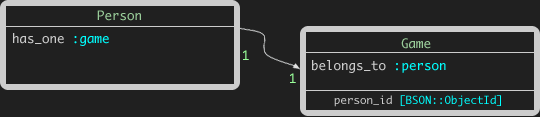
<style>
.page{position:relative;width:540px;height:117px;background:#202020}
.page>*{position:absolute;margin:0}
.t1{font:12.5px "Monaco";color:#99cc99}
.t2{font:12.5px "Monaco";color:#cccccc}
.t3{font:12.5px "Monaco";color:#00ffff}
.t4{font:12.5px "Monaco";color:#99ff99}
.t5{font:10.8px "Monaco";color:#00ffff}
.t6{font:10.8px "Monaco";color:#cccccc}
</style>
<div class="page">
<p class="t1" style="left:97px;top:10px;width:44px;height:11px">Person</p>
<p class="t2" style="left:13px;top:33px;width:96px;height:13px">has_one <span class="t3">:game</span></p>
<p class="t1" style="left:401px;top:38px;width:30px;height:11px">Game</p>
<p class="t4" style="left:243px;top:50px;width:6px;height:10px">1</p>
<p class="t2" style="left:312px;top:60px;width:134px;height:13px">belongs_to <span class="t3">:person</span></p>
<p class="t4" style="left:290px;top:73px;width:6px;height:10px">1</p>
<p class="t5" style="left:334px;top:95px;width:167px;height:12px"><span class="t6">person_id </span>[BSON::ObjectId]</p>
</div>
